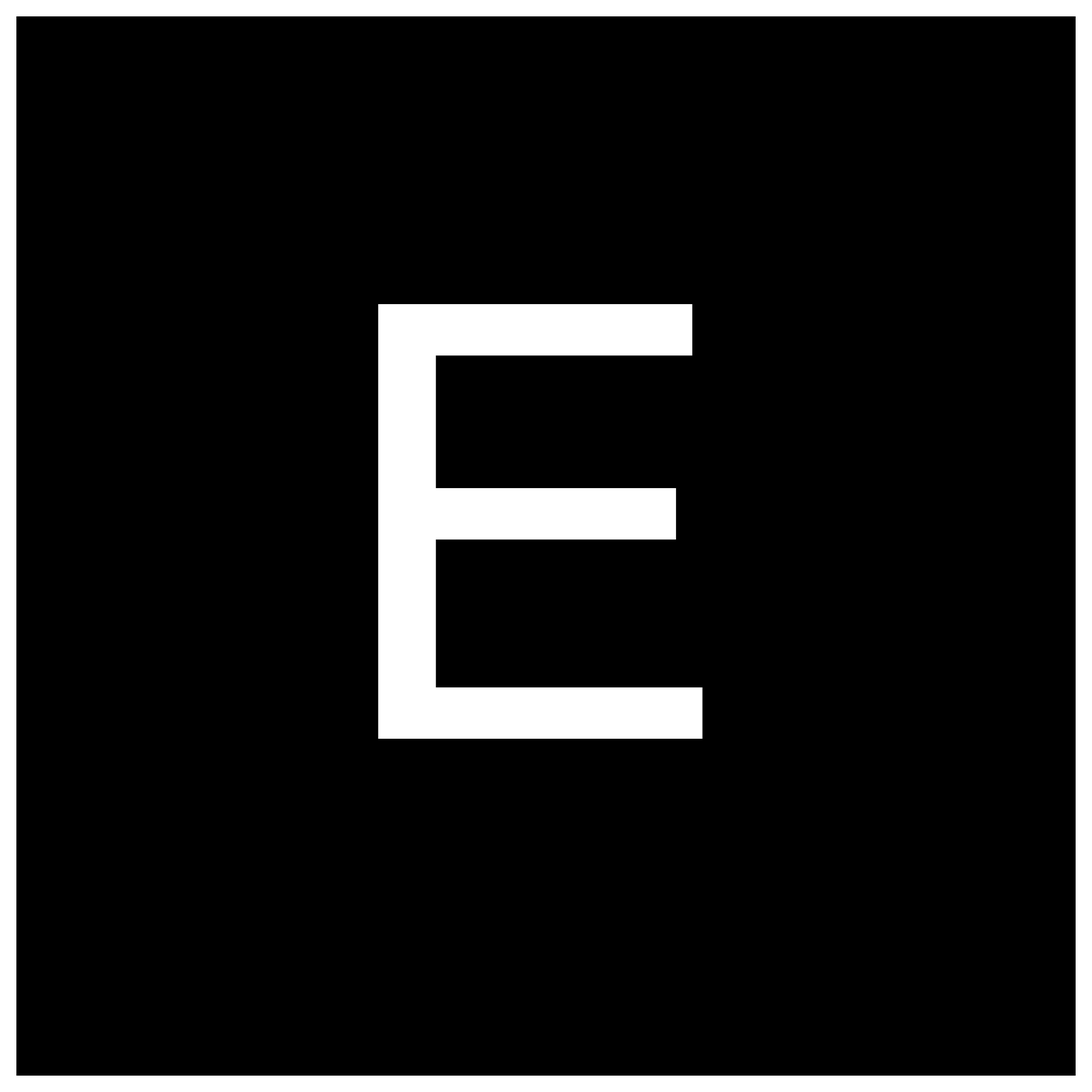
<style>
.page{position:relative;width:1092px;height:1092px;background:#000000}
.page>*{position:absolute;margin:0}
.t1{font:606.7px "ArialMT";color:#ffffff}
</style>
<div class="page">
<p class="t1" style="left:378px;top:304px;width:325px;height:435px">E</p>
</div>
